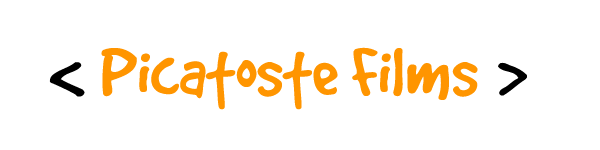
<style>
.page{position:relative;width:600px;height:150px;background:#ffffff}
.page>*{position:absolute;margin:0}
.t1{font:75px "GoodDog";color:#ff9600}
.t2{font:75px "GoodDog";color:#000000}
</style>
<div class="page">
<p class="t1" style="left:101px;top:47px;width:377px;height:63px">Picatoste Films</p>
<p class="t2" style="left:49px;top:62px;width:36px;height:35px">&lt;</p>
<p class="t2" style="left:498px;top:62px;width:29px;height:34px">&gt;</p>
</div>
